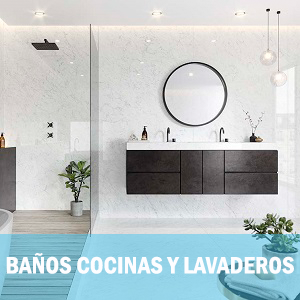
<style>
.page{position:relative;width:300px;height:300px}
.page>*{position:absolute;margin:0}
.t1{font:41.7px "FranklinGothic-DemiCond";letter-spacing:0.005em;color:#fdfdff;text-transform:uppercase}
</style>
<div class="page">
<p class="t1" style="left:6px;top:253px;width:288px;height:21px">baños cocinas y lavaderos</p>
</div>
